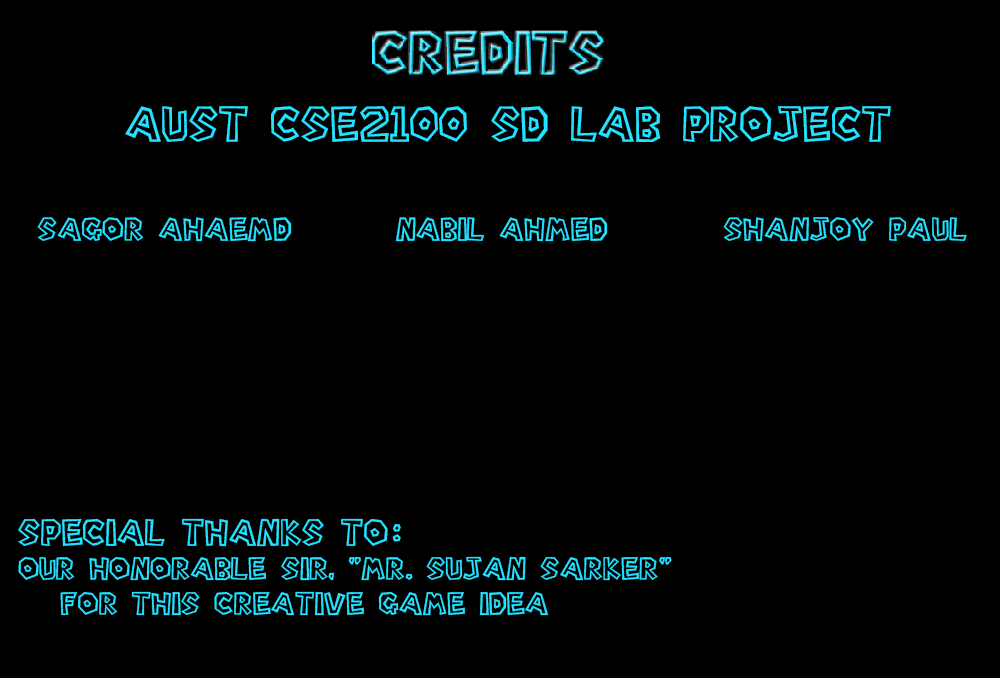
<style>
.page{position:relative;width:1000px;height:678px;background:#000000}
.page>*{position:absolute;margin:0}
.t1{font:44.9px "Super-Mario-Bros.-Regular";color:#22e2ff}
.t2{font:29.7px "Super-Mario-Bros.-Regular";color:#22e2ff}
.t3{font:28.8px "Super-Mario-Bros.-Regular";color:#22e2ff}
.t4{font:33.9px "Super-Mario-Bros.-Regular";color:#22e2ff}
</style>
<div class="page">
<p class="t1" style="left:125px;top:106px;width:766px;height:36px">Aust CSE2100 SD Lab Project</p>
<p class="t2" style="left:37px;top:217px;width:255px;height:25px">Sagor Ahaemd</p>
<p class="t2" style="left:395px;top:217px;width:213px;height:25px">Nabil Ahmed</p>
<p class="t2" style="left:723px;top:217px;width:244px;height:25px">Shanjoy Paul</p>
<p class="t3" style="left:18px;top:518px;width:654px;height:98px"><span class="t4">Special Thanks To:<br></span>our Honorable Sir, "Mr. Sujan SarKer"<br>   For This Creative Game Idea</p>
</div>
